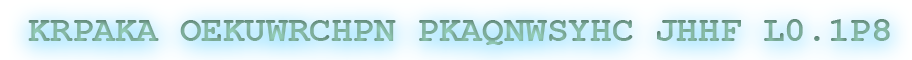
<style>
.page{position:relative;width:912px;height:60px}
.page>*{position:absolute;margin:0}
.t1{font:36px "CourierNewPS-BoldMT";color:#7dad9b}
</style>
<div class="page">
<p class="t1" style="left:28px;top:19px;width:862px;height:26px">KRPAKA OEKUWRCHPN PKAQNWSYHC JHHF L0.1P8</p>
</div>
